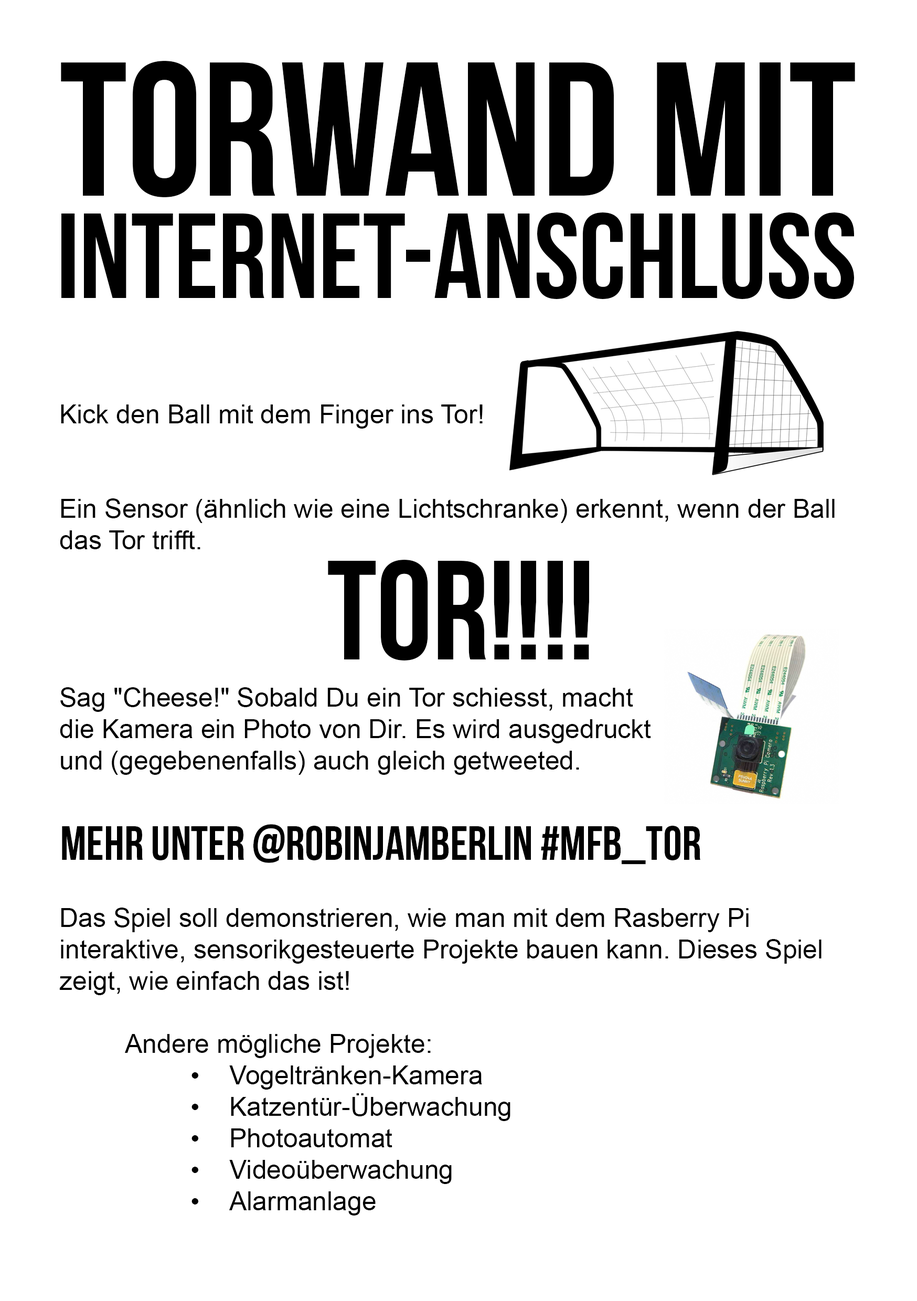
<style>
.page{position:relative;width:917px;height:1301px;background:#ffffff}
.page>*{position:absolute;margin:0}
.t1{font:190.6px "BebasNeue";color:#000000}
.t2{font:120.8px "BebasNeue";color:#000000}
.t3{font:26.2px "ArialMT";color:#000000}
.t4{font:140.7px "BebasNeue";color:#000000}
.t5{font:48.1px "BebasNeue";color:#000000}
</style>
<div class="page">
<p class="t1" style="left:61px;top:61px;width:794px;height:136px">Torwand mit</p>
<p class="t2" style="left:61px;top:212px;width:793px;height:87px">Internet-Anschluss</p>
<p class="t3" style="left:59px;top:404px;width:775px;height:811px">Kick den Ball mit dem Finger ins Tor!<br><br><br>Ein Sensor (ähnlich wie eine Lichtschranke) erkennt, wenn der Ball das Tor trifft.<br><br><br><br><br>Sag "Cheese!" Sobald Du ein Tor schiesst, macht<br>die Kamera ein Photo von Dir. Es wird ausgedruckt<br>und (gegebenenfalls) auch gleich getweeted.<br><br><br><br><br>Das Spiel soll demonstrieren, wie man mit dem Rasberry Pi interaktive, sensorikgesteuerte Projekte bauen kann. Dieses Spiel zeigt, wie einfach das ist!<br><br>Andere mögliche Projekte:<br>•   Vogeltränken-Kamera<br>•   Katzentür-Überwachung<br>•  Photoautomat<br>•   Videoüberwachung<br>•  Alarmanlage</p>
<p class="t4" style="left:328px;top:560px;width:261px;height:100px">TOR!!!!</p>
<p class="t5" style="left:62px;top:824px;width:638px;height:40px">Mehr unter @robinjamberlin #mfb_tor</p>
</div>
